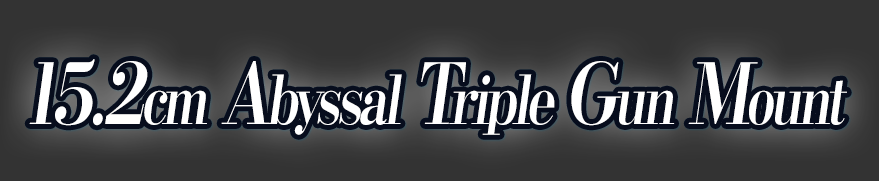
<style>
.page{position:relative;width:879px;height:181px;background:#333333}
.page>*{position:absolute;margin:0}
.t1{font:67.2px "KochoStd-Heavy";letter-spacing:-0.08em;color:#ffffff;font-style:italic;scale:0.79 1}
.t2{font:84px "KochoStd-Heavy";letter-spacing:-0.08em;color:#ffffff;font-style:italic;scale:0.79 1}
</style>
<div class="page">
<p class="t1" style="left:29px;top:59px;width:818px;height:76px"><span class="t2">15.2</span>cm<span class="t2"> A</span>byssal<span class="t2"> T</span>riple <span class="t2">G</span>un<span class="t2"> M</span>ount</p>
</div>
